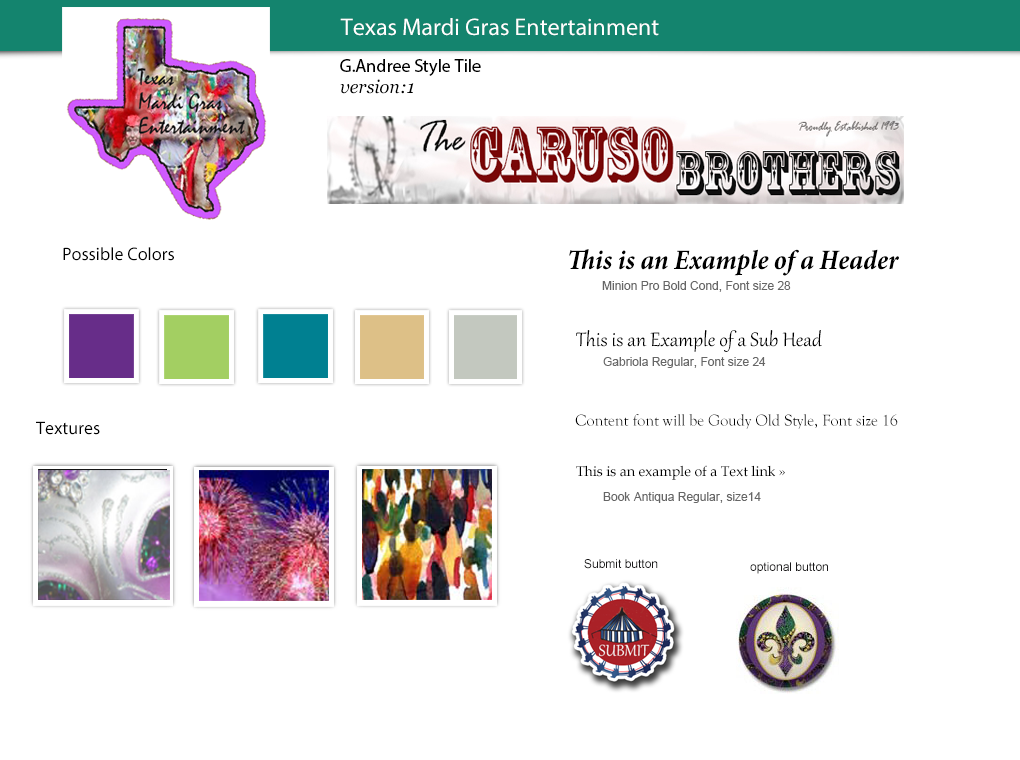
<style>
.page{position:relative;width:1020px;height:760px;background:#ffffff}
.page>*{position:absolute;margin:0}
.t1{font:24px "MyriadPro-Regular";color:#ffffff}
.t2{font:18px "MyriadPro-Regular";color:#000000}
.t3{font:18px "Georgia-Italic";color:#000000}
.t4{font:28px "MinionPro-BoldCnIt";color:#000000}
.t5{font:12px "ArialMT";color:#666666}
.t6{font:24px "Gabriola";color:#000000}
.t7{font:16px "GoudyOldStyleT-Regular";color:#000000}
.t8{font:14px "BookAntiqua";color:#000000}
.t9{font:12px "ArialMT";color:#1a191a}
</style>
<div class="page">
<p class="t1" style="left:340px;top:18px;width:319px;height:18px">Texas Mardi Gras Entertainment</p>
<p class="t2" style="left:340px;top:59px;width:141px;height:17px">G.Andree Style Tile</p>
<p class="t3" style="left:340px;top:79px;width:74px;height:15px">version:1</p>
<p class="t2" style="left:63px;top:247px;width:111px;height:14px">Possible Colors</p>
<p class="t4" style="left:569px;top:249px;width:330px;height:27px">This is an Example of a Header</p>
<p class="t5" style="left:602px;top:281px;width:189px;height:11px">Minion Pro Bold Cond, Font size 28</p>
<p class="t6" style="left:576px;top:330px;width:246px;height:22px">This is an Example of a Sub Head</p>
<p class="t5" style="left:603px;top:357px;width:163px;height:11px">Gabriola Regular, Font size 24</p>
<p class="t7" style="left:575px;top:414px;width:323px;height:15px">Content font will be Goudy Old Style, Font size 16</p>
<p class="t2" style="left:36px;top:421px;width:64px;height:14px">Textures</p>
<p class="t8" style="left:576px;top:465px;width:209px;height:15px">This is an example of a Text link »</p>
<p class="t5" style="left:603px;top:492px;width:158px;height:11px">Book Antiqua Regular, size14</p>
<p class="t9" style="left:584px;top:559px;width:74px;height:10px">Submit button</p>
<p class="t9" style="left:750px;top:562px;width:78px;height:12px">optional button</p>
</div>
